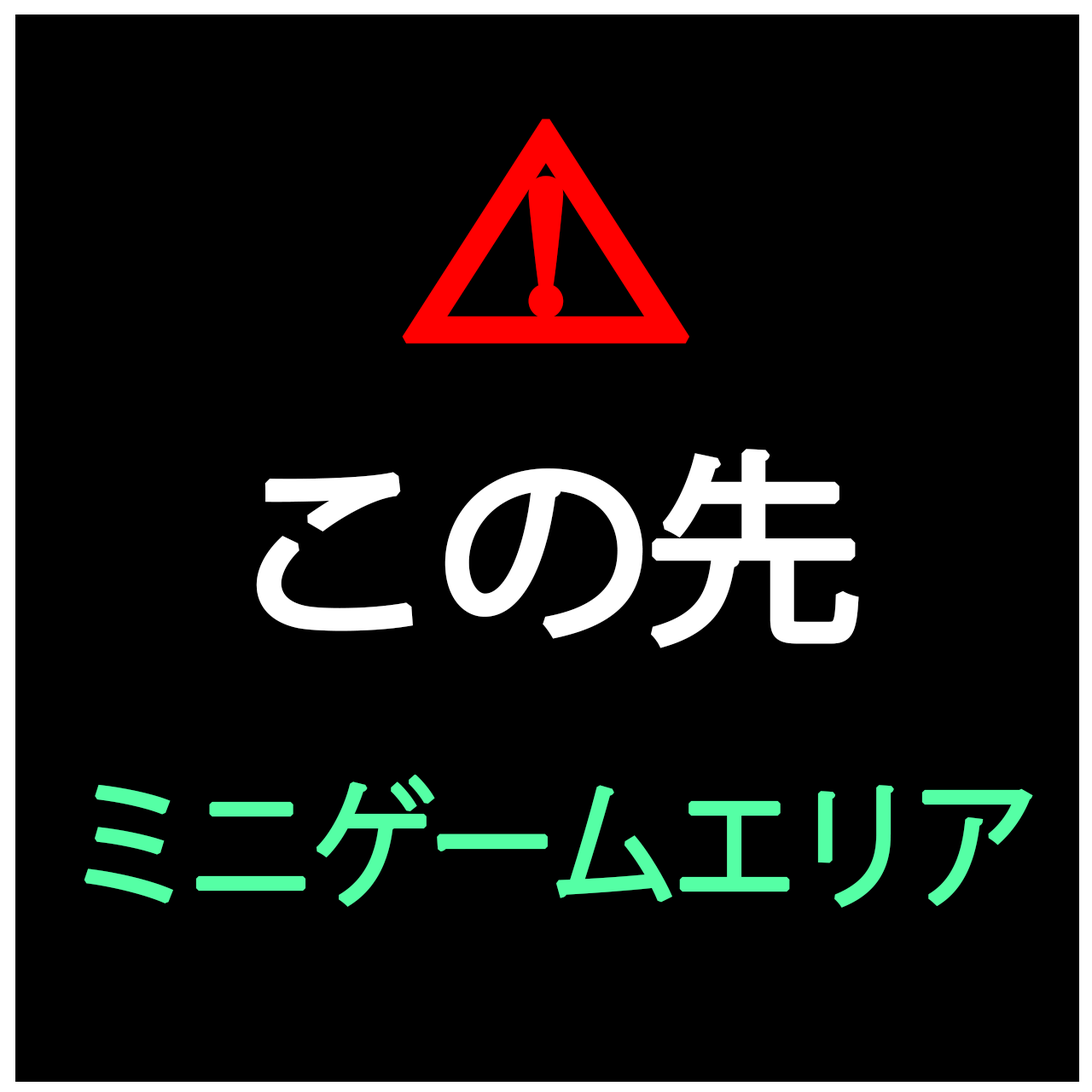
<style>
.page{position:relative;width:1092px;height:1092px;background:#000000}
.page>*{position:absolute;margin:0}
.t1{font:323.5px "KozGoPr6N-Regular";letter-spacing:-0.07em;color:#ff0000;font-weight:bold}
.t2{font:203.9px "KozGoPr6N-Regular";letter-spacing:-0.07em;color:#ffffff;font-weight:bold;scale:1.07 1}
.t3{font:136.5px "KozGoPr6N-Regular";letter-spacing:-0.07em;color:#55ffa5;font-weight:bold;scale:0.92 1}
</style>
<div class="page">
<p class="t1" style="left:402px;top:119px;width:287px;height:225px">⚠</p>
<p class="t2" style="left:256px;top:449px;width:603px;height:199px">この先</p>
<p class="t3" style="left:84px;top:775px;width:949px;height:133px">ミニゲームエリア</p>
</div>
